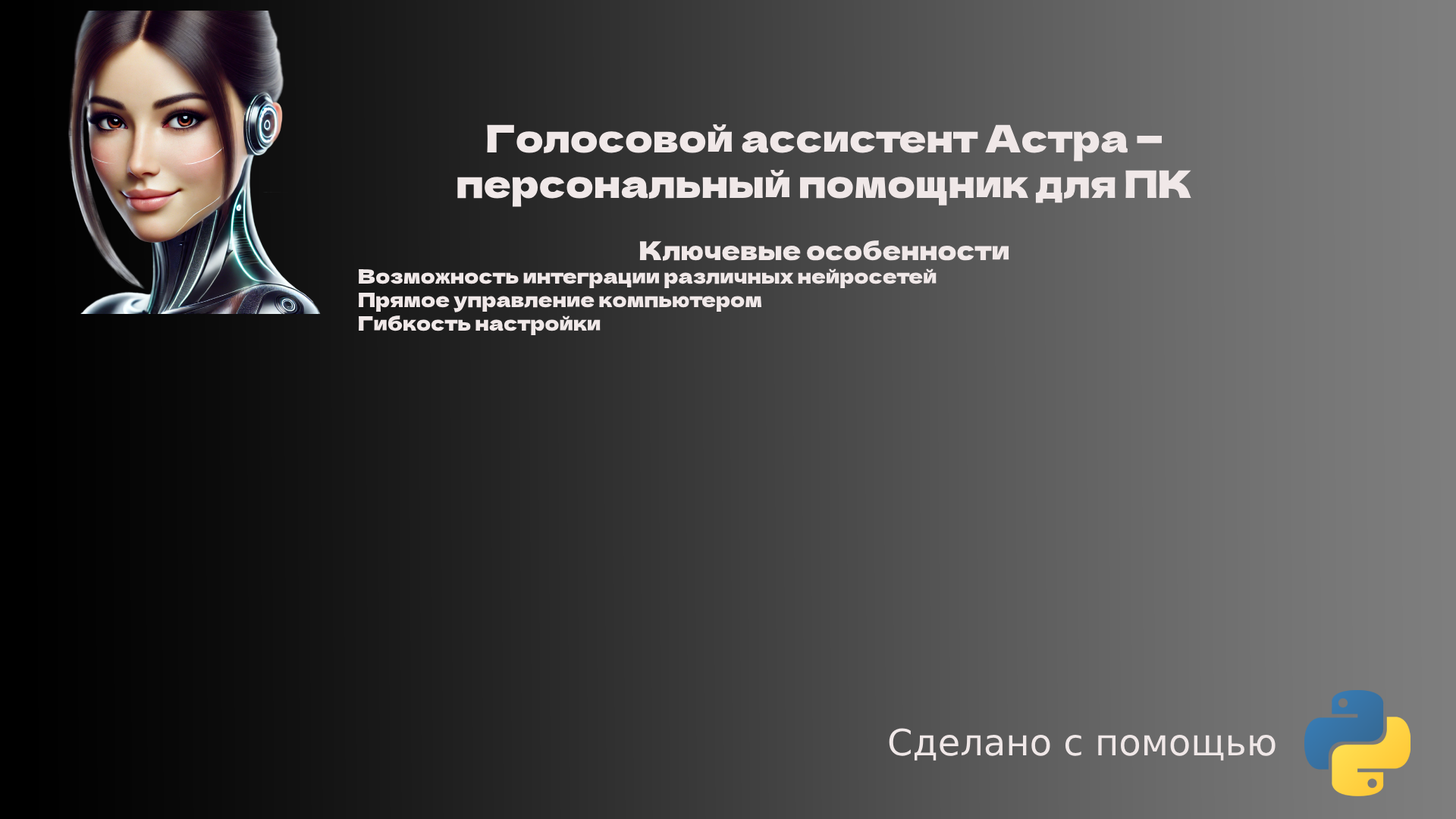
<style>
.page{position:relative;width:1456px;height:819px}
.page>*{position:absolute;margin:0}
.t1{font:19.7px "DelaGothicOne-Regular";color:#f0e8e8}
.t2{font:37.9px "DelaGothicOne-Regular";color:#f0e8e8}
.t3{font:25.8px "DelaGothicOne-Regular";color:#f0e8e8}
.t4{font:36.4px "DejaVuSans";color:#f0e8e8}
</style>
<div class="page">
<p class="t1" style="left:359px;top:124px;width:832px;height:212px;text-align:center"><span class="t2">Голосовой ассистент Астра —  персональный помощник для ПК<br><br></span><span class="t3">Ключевые особенности<br></span>Возможность интеграции различных нейросетей<br>Прямое управление компьютером<br>Гибкость настройки</p>
<p class="t4" style="left:889px;top:728px;width:386px;height:33px">Сделано с помощью</p>
</div>
